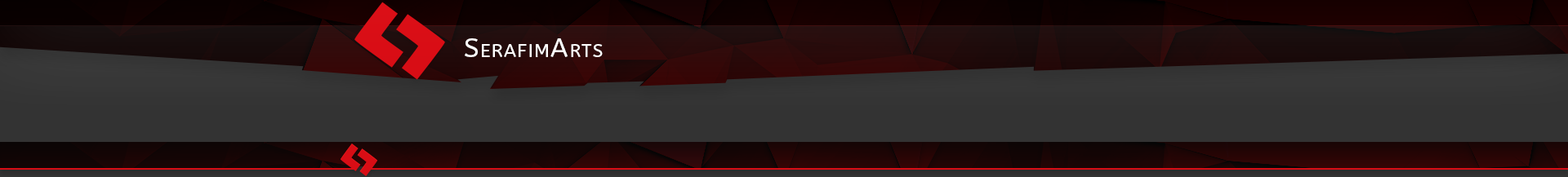
<style>
.page{position:relative;width:1568px;height:177px;background:#333333}
.page>*{position:absolute;margin:0}
.t1{font:26.1px "ABeeZee-Regular";letter-spacing:0.06em;color:#ffffff;font-variant:small-caps}
</style>
<div class="page">
<p class="t1" style="left:465px;top:38px;width:138px;height:19px">SerafimArts</p>
</div>
